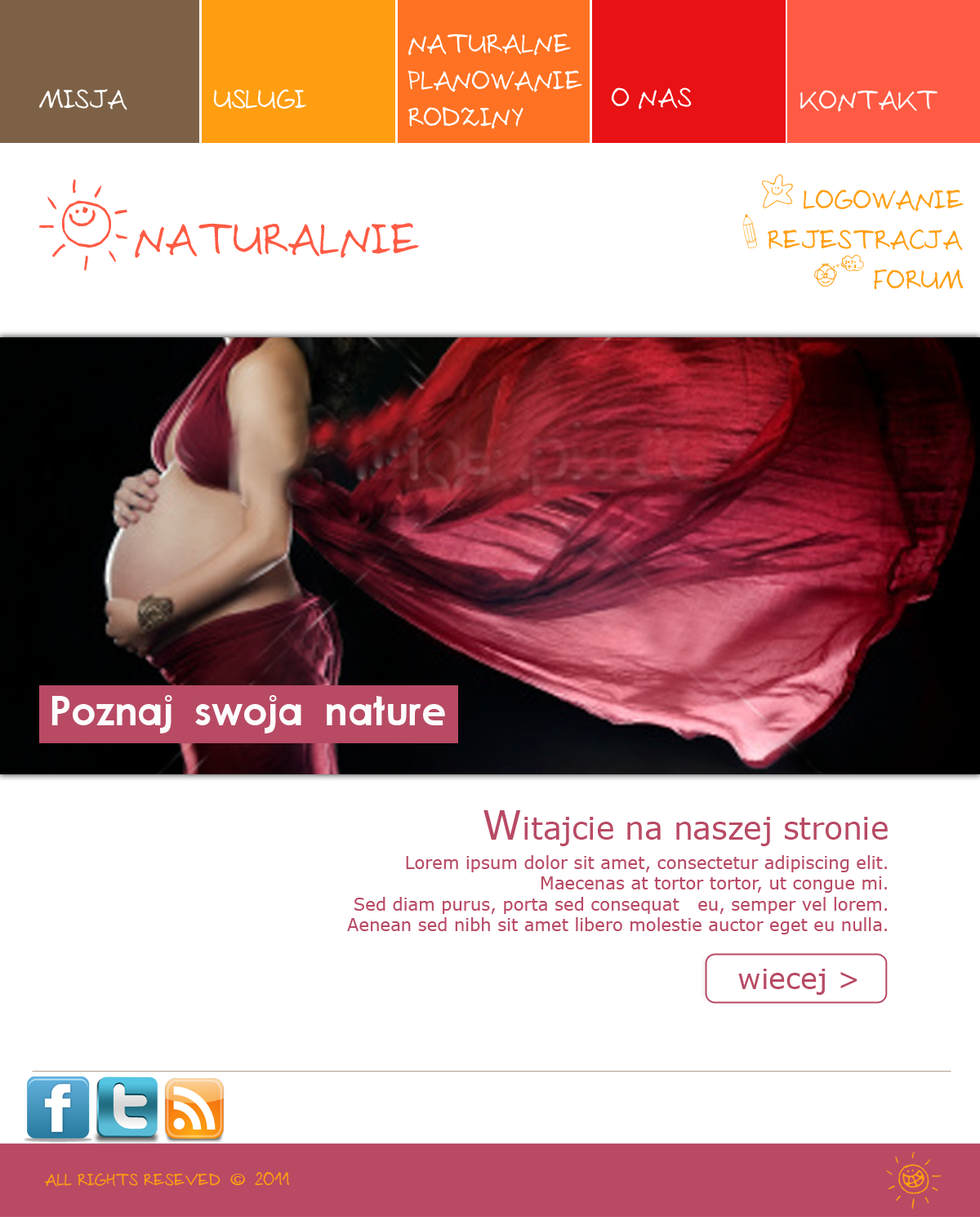
<style>
.page{position:relative;width:980px;height:1217px;background:#ffffff}
.page>*{position:absolute;margin:0}
.t1{font:30.6px "Sloneczko";color:#ffffff}
.t2{font:30.6px "Sloneczko";color:#fdfdfd}
.t3{font:30.6px "Sloneczko";color:#ff9e11}
.t4{font:37.4px "Sloneczko";color:#ff9e11}
.t5{font:50.1px "Sloneczko";color:#ff5b44}
.t6{font:81.7px "Sloneczko";color:#ff5b44}
.t7{font:48.7px "CacophonyLoud";color:#fdfdfd;scale:0.81 1}
.t8{font:30.6px "Verdana";color:#b84a64}
.t9{font:40.8px "Verdana";color:#b84a64}
.t10{font:17.3px "Verdana";color:#b84a64}
.t11{font:28.4px "Verdana";color:#b84a64}
.t12{font:51.6px "Sloneczko";color:#ff9e11}
.t13{font:19.2px "Sloneczko";color:#ff9e11}
.t14{font:19.2px "CacophonyLoud";color:#ff9e11}
</style>
<div class="page">
<p class="t1" style="left:408px;top:33px;width:174px;height:96px">naturalne <br>planowanie<br>rodziny</p>
<p class="t1" style="left:39px;top:89px;width:88px;height:21px">misja</p>
<p class="t1" style="left:213px;top:89px;width:93px;height:20px">uslugi</p>
<p class="t1" style="left:611px;top:87px;width:81px;height:22px">o nas</p>
<p class="t2" style="left:800px;top:90px;width:138px;height:22px">kontakt</p>
<p class="t3" style="left:762px;top:174px;width:202px;height:38px"><span class="t4">L</span> logowanie</p>
<p class="t5" style="left:38px;top:179px;width:382px;height:92px"><span class="t6">A</span>naturalnie</p>
<p class="t3" style="left:742px;top:214px;width:221px;height:37px"><span class="t4">U</span> rejestracja</p>
<p class="t3" style="left:814px;top:255px;width:150px;height:35px"><span class="t4">S</span> forum</p>
<p class="t7" style="left:51px;top:695px;width:394px;height:38px">Poznaj swoja nature</p>
<p class="t8" style="left:483px;top:810px;width:405px;height:36px"><span class="t9">W</span>itajcie na naszej stronie</p>
<p class="t10" style="left:347px;top:855px;width:540px;height:79px;text-align:right">Lorem ipsum dolor sit amet, consectetur adipiscing elit. <br>Maecenas at tortor tortor, ut congue mi. <br>Sed diam purus, porta sed consequat   eu, semper vel lorem. <br>Aenean sed nibh sit amet libero molestie auctor eget eu nulla.</p>
<p class="t11" style="left:738px;top:969px;width:119px;height:26px">wiecej &gt;</p>
<p class="t12" style="left:886px;top:1151px;width:56px;height:58px">Z</p>
<p class="t13" style="left:44px;top:1171px;width:245px;height:16px">all rights reseved <span class="t14">© </span>2011</p>
</div>
